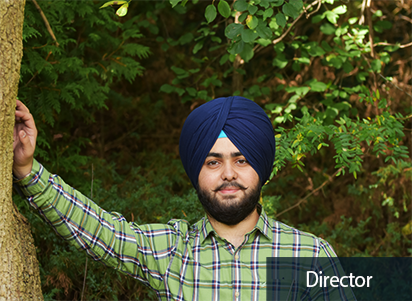
<style>
.page{position:relative;width:412px;height:301px}
.page>*{position:absolute;margin:0}
.t1{font:22.6px "MyriadPro-Regular";letter-spacing:0.005em;color:#ffffff;scale:0.91 1}
</style>
<div class="page">
<p class="t1" style="left:306px;top:271px;width:67px;height:16px">Director</p>
</div>
